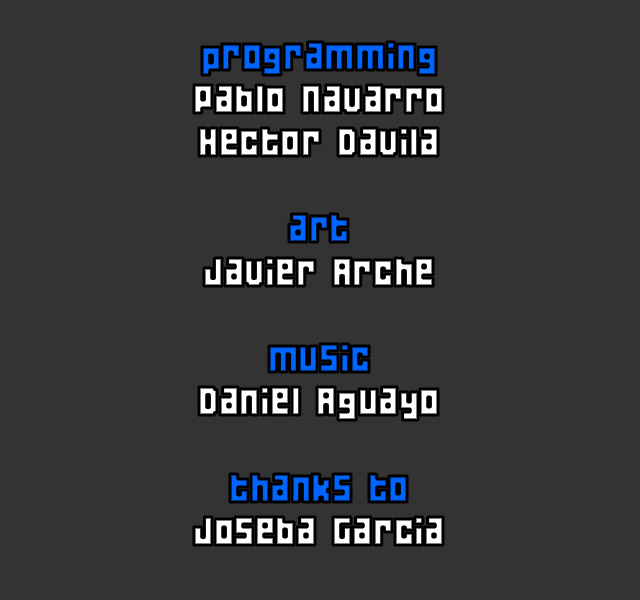
<style>
.page{position:relative;width:640px;height:600px;background:#333333}
.page>*{position:absolute;margin:0}
.t1{font:36px "04b19"}
</style>
<div class="page">
<p class="t1" style="left:194px;top:42px;width:249px;height:503px;text-align:center">programming<br>Pablo Navarro<br>Hector Davila<br><br>art<br>Javier Arche<br><br>music<br>Daniel Aguayo<br><br>thanks to<br>Joseba Garcia</p>
</div>
